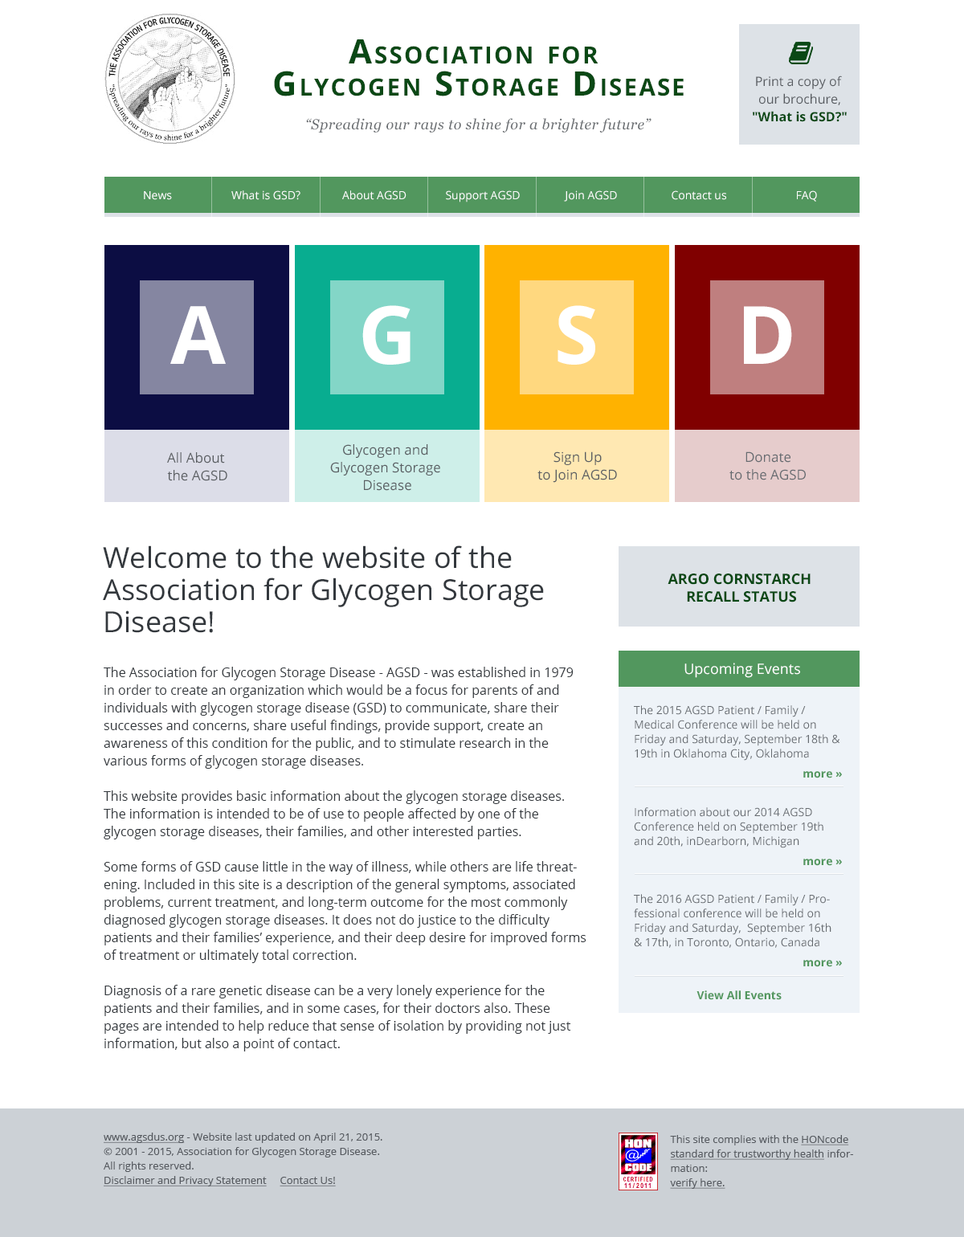
<style>
.page{position:relative;width:964px;height:1237px;background:#ffffff}
.page>*{position:absolute;margin:0}
.t1{font:33.7px/32.1px "OpenSans-Bold";letter-spacing:0.075em;color:#0a4815;font-variant:small-caps}
.t2{font:12.9px/17.7px "OpenSans";color:#575b60}
.t3{font:12.9px/17.7px "OpenSans-Bold";color:#0a4815}
.t4{font:14.5px "Georgia-Italic";letter-spacing:0.025em;color:#696d71}
.t5{font:11.2px "OpenSans";color:#ffffff}
.t6{font:80.3px "OpenSans-Bold";color:#ffffff}
.t7{font:13.7px/17.7px "OpenSans";color:#5a5f63}
.t8{font:13.7px/17.7px "OpenSans";color:#5b5f63}
.t9{font:13.7px/17.7px "OpenSans";color:#666b70}
.t10{font:28.9px/32.1px "OpenSans";color:#33383d}
.t11{font:14.5px/17.7px "OpenSans-Bold";color:#0a4815}
.t12{font:14.5px "OpenSans";color:#ffffff}
.t13{font:12.9px/17.7px "OpenSans";color:#33383d}
.t14{font:11.2px/14.5px "OpenSans";color:#666b70}
.t15{font:11.2px "OpenSans-Bold";color:#52975e}
.t16{font:10.4px/14.5px "OpenSans";color:#565a60}
.t17{font:10.4px/14.5px "OpenSans";color:#565a60;text-decoration:underline}
</style>
<div class="page">
<p class="t1" style="left:274px;top:39px;width:410px;height:57px;text-align:center">Association for <br>Glycogen Storage Disease</p>
<p class="t2" style="left:753px;top:76px;width:94px;height:46px;text-align:center">Print a copy of <br>our brochure,<br><span class="t3">"What is GSD?"</span></p>
<p class="t4" style="left:306px;top:118px;width:345px;height:15px">“Spreading our rays to shine for a brighter future”</p>
<p class="t5" style="left:144px;top:191px;width:28px;height:9px">News</p>
<p class="t5" style="left:231px;top:190px;width:69px;height:10px">What is GSD?</p>
<p class="t5" style="left:342px;top:190px;width:64px;height:10px">About AGSD</p>
<p class="t5" style="left:446px;top:190px;width:74px;height:12px">Support AGSD</p>
<p class="t5" style="left:564px;top:190px;width:53px;height:12px">Join AGSD</p>
<p class="t5" style="left:672px;top:190px;width:54px;height:10px">Contact us</p>
<p class="t5" style="left:797px;top:190px;width:20px;height:12px">FAQ</p>
<p class="t6" style="left:362px;top:305px;width:48px;height:60px">G</p>
<p class="t6" style="left:557px;top:305px;width:38px;height:60px">S</p>
<p class="t6" style="left:170px;top:306px;width:56px;height:58px">A</p>
<p class="t6" style="left:744px;top:306px;width:48px;height:58px">D</p>
<p class="t7" style="left:330px;top:444px;width:110px;height:47px;text-align:center">Glycogen and <br>Glycogen Storage <br>Disease</p>
<p class="t8" style="left:167px;top:452px;width:60px;height:29px;text-align:center">All About <br>the AGSD</p>
<p class="t7" style="left:537px;top:451px;width:80px;height:32px;text-align:center">Sign Up<br>to Join AGSD</p>
<p class="t9" style="left:729px;top:451px;width:77px;height:29px;text-align:center">Donate<br>to the AGSD</p>
<p class="t10" style="left:103px;top:545px;width:441px;height:88px">Welcome to the website of the Association for Glycogen Storage Disease!</p>
<p class="t11" style="left:668px;top:574px;width:143px;height:28px;text-align:center">ARGO CORNSTARCH <br>RECALL STATUS</p>
<p class="t12" style="left:684px;top:663px;width:116px;height:15px">Upcoming Events</p>
<p class="t13" style="left:104px;top:667px;width:482px;height:384px">The Association for Glycogen Storage Disease - AGSD - was established in 1979 in order to create an organization which would be a focus for parents of and individuals with glycogen storage disease (GSD) to communicate, share their successes and concerns, share useful findings, provide support, create an awareness of this condition for the public, and to stimulate research in the various forms of glycogen storage diseases.<br> <br>This website provides basic information about the glycogen storage diseases. The information is intended to be of use to people affected by one of the glycogen storage diseases, their families, and other interested parties.<br> <br>Some forms of GSD cause little in the way of illness, while others are life threatening. Included in this site is a description of the general symptoms, associated problems, current treatment, and long-term outcome for the most commonly diagnosed glycogen storage diseases. It does not do justice to the difficulty patients and their families’ experience, and their deep desire for improved forms of treatment or ultimately total correction.<br> <br>Diagnosis of a rare genetic disease can be a very lonely experience for the patients and their families, and in some cases, for their doctors also. These pages are intended to help reduce that sense of isolation by providing not just information, but also a point of contact.</p>
<p class="t14" style="left:634px;top:705px;width:206px;height:56px">The 2015 AGSD Patient / Family / Medical Conference will be held on Friday and Saturday, September 18th &amp; 19th in Oklahoma City, Oklahoma</p>
<p class="t15" style="left:803px;top:771px;width:39px;height:7px">more »</p>
<p class="t14" style="left:634px;top:807px;width:189px;height:41px">Information about our 2014 AGSD Conference held on September 19th and 20th, inDearborn, Michigan</p>
<p class="t15" style="left:803px;top:859px;width:39px;height:7px">more »</p>
<p class="t14" style="left:634px;top:894px;width:197px;height:54px">The 2016 AGSD Patient / Family / Professional conference will be held on Friday and Saturday,  September 16th &amp; 17th, in Toronto, Ontario, Canada</p>
<p class="t15" style="left:803px;top:960px;width:39px;height:7px">more »</p>
<p class="t15" style="left:696px;top:990px;width:86px;height:10px">View All Events</p>
<p class="t16" style="left:104px;top:1133px;width:278px;height:53px"><span class="t17">www.agsdus.org</span> - Website last updated on April 21, 2015.<br>© 2001 - 2015, Association for Glycogen Storage Disease.<br>All rights reserved.<br><span class="t17">Disclaimer and Privacy Statement     Contact Us!</span></p>
<p class="t17" style="left:670px;top:1135px;width:183px;height:54px"><span class="t16">This site complies with the </span>HONcode standard for trustworthy health<span class="t16"> information:<br></span>verify here.</p>
</div>
